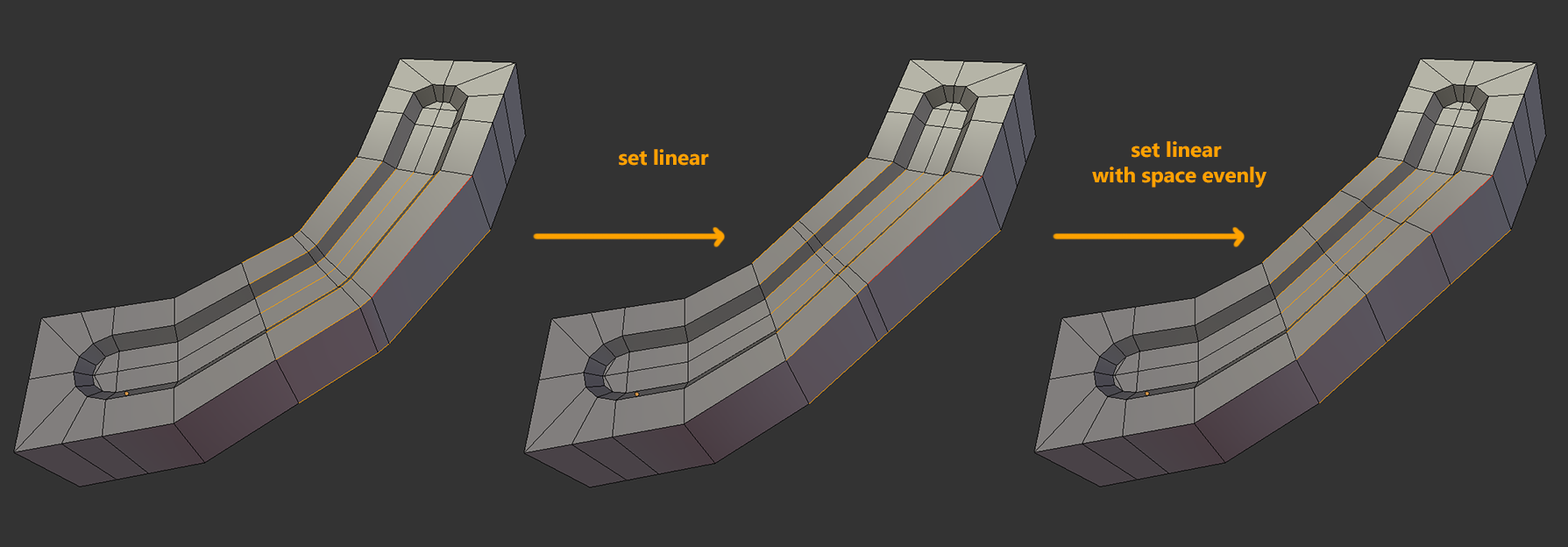
<style>
.page{position:relative;width:1568px;height:547px;background:#333333}
.page>*{position:absolute;margin:0}
.t1{font:21px "SegoeUI-Bold";color:#ffa200}
</style>
<div class="page">
<p class="t1" style="left:619px;top:149px;width:90px;height:17px">set linear</p>
<p class="t1" style="left:1092px;top:141px;width:174px;height:47px;text-align:center">set linear <br>with space evenly</p>
</div>
